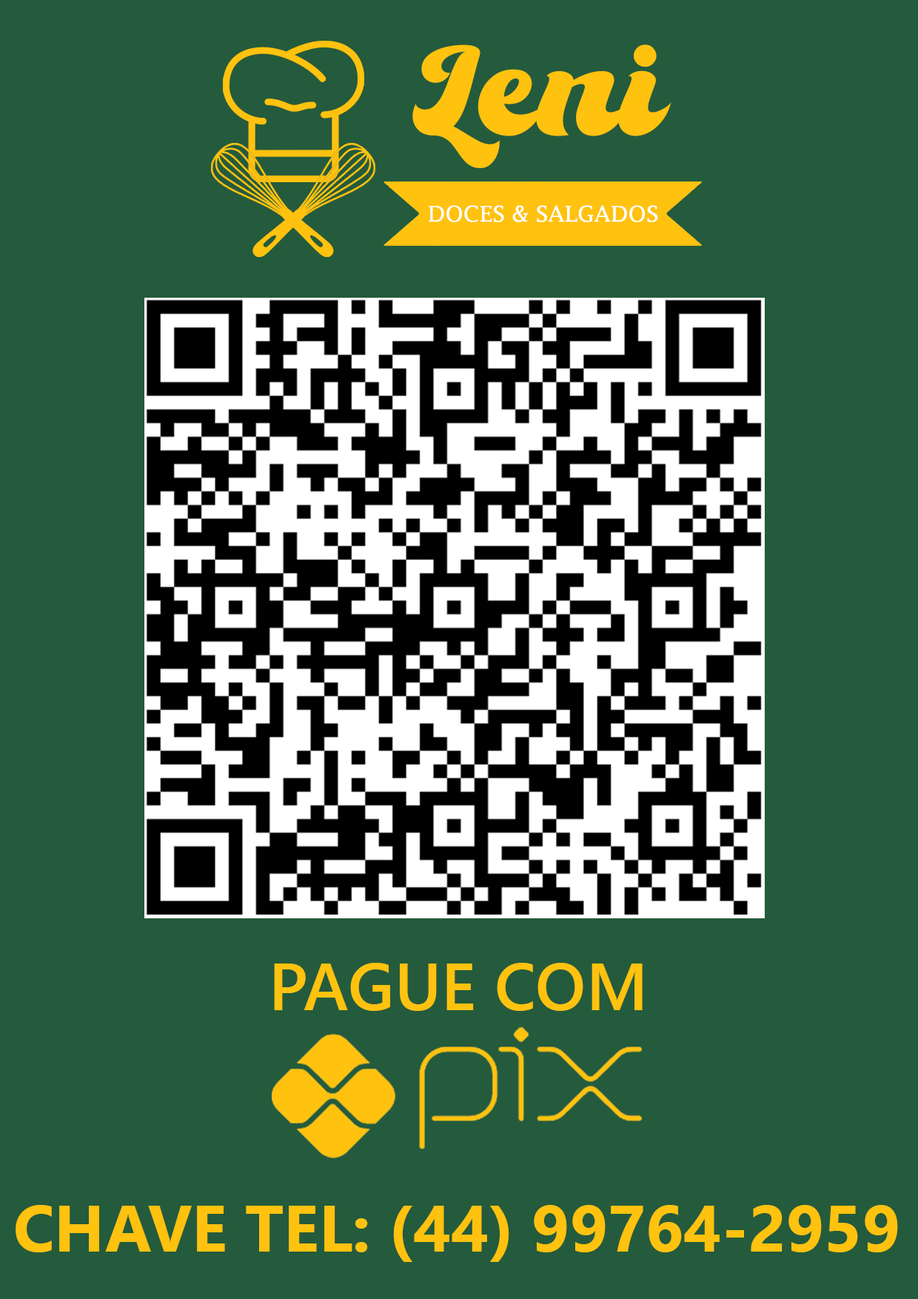
<style>
.page{position:relative;width:918px;height:1299px;background:#245b3c}
.page>*{position:absolute;margin:0}
.t1{font:151.5px "TheKanderlic-Regular";color:#ffc20f}
.t2{font:21.6px "LucidaFax";color:#ffffff;scale:1.05 1}
.t3{font:67px "SegoeUI-Semibold";color:#ffc20f}
.t4{font:66px "SegoeUI-Bold";color:#ffc20f}
</style>
<div class="page">
<p class="t1" style="left:412px;top:44px;width:260px;height:124px">Leni</p>
<p class="t2" style="left:429px;top:205px;width:229px;height:17px">DOCES &amp; SALGADOS</p>
<p class="t3" style="left:274px;top:963px;width:369px;height:48px">PAGUE COM</p>
<p class="t4" style="left:16px;top:1205px;width:882px;height:57px">CHAVE TEL: (44) 99764-2959</p>
</div>
